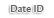
<style>
.page{position:relative;width:54px;height:18px;background:#ffffff}
.page>*{position:absolute;margin:0}
.t1{font:10px "AmiraParadiso";color:#646464}
</style>
<div class="page">
<p class="t1" style="left:10px;top:5px;width:34px;height:7px">Date ID</p>
</div>
